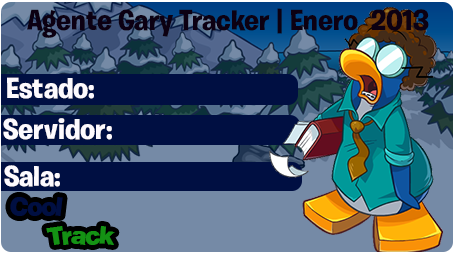
<style>
.page{position:relative;width:457px;height:255px;background:#758aa6}
.page>*{position:absolute;margin:0}
.t1{font:29px "BurbankBigRegular-Bold";color:#0c0012}
.t2{font:29px "BurbankBigRegular-Bold";color:#fdfafe}
</style>
<div class="page">
<p class="t1" style="left:27px;top:8px;width:402px;height:30px">Agente Gary Tracker | Enero  2013</p>
<p class="t2" style="left:7px;top:77px;width:87px;height:22px">Estado:</p>
<p class="t2" style="left:3px;top:118px;width:109px;height:22px">Servidor:</p>
<p class="t2" style="left:4px;top:165px;width:56px;height:22px">Sala:</p>
</div>
